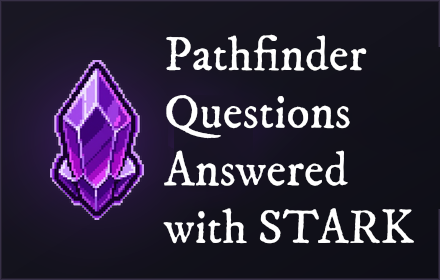
<style>
.page{position:relative;width:440px;height:280px}
.page>*{position:absolute;margin:0}
.t1{font:48px "IM_FELL_DW_Pica_Roman";color:#ffffff}
</style>
<div class="page">
<p class="t1" style="left:162px;top:34px;width:253px;height:211px">Pathfinder<br>Questions<br>Answered<br>with STARK</p>
</div>
